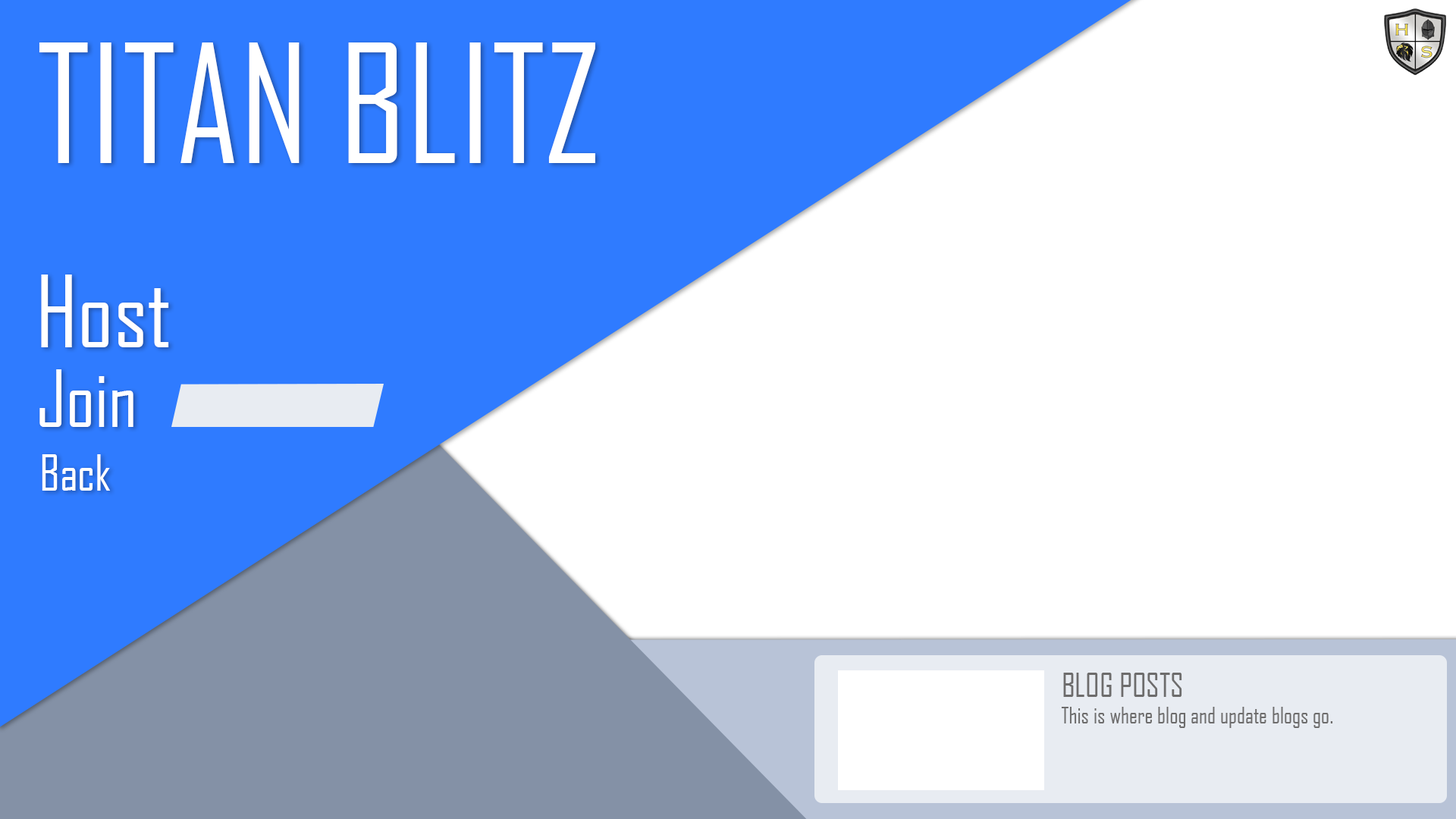
<style>
.page{position:relative;width:1456px;height:819px;background:#ffffff}
.page>*{position:absolute;margin:0}
.t1{font:158px "AgencyFB-Reg";color:#ffffff}
.t2{font:94.8px "AgencyFB-Reg";color:#ffffff}
.t3{font:75.8px "AgencyFB-Reg";color:#ffffff}
.t4{font:47.4px "AgencyFB-Reg";color:#ffffff}
.t5{font:22.1px "AgencyFB-Reg";color:#6d6c6c}
.t6{font:31.6px "AgencyFB-Reg";color:#6d6c6c}
</style>
<div class="page">
<p class="t1" style="left:39px;top:42px;width:556px;height:121px">TITAN BLITZ</p>
<p class="t2" style="left:41px;top:275px;width:128px;height:72px">Host</p>
<p class="t3" style="left:39px;top:369px;width:94px;height:58px">Join</p>
<p class="t4" style="left:42px;top:454px;width:68px;height:37px">Back</p>
<p class="t5" style="left:1061px;top:673px;width:272px;height:55px"><span class="t6">BLOG POSTS<br></span>This is where blog and update blogs go.</p>
</div>
